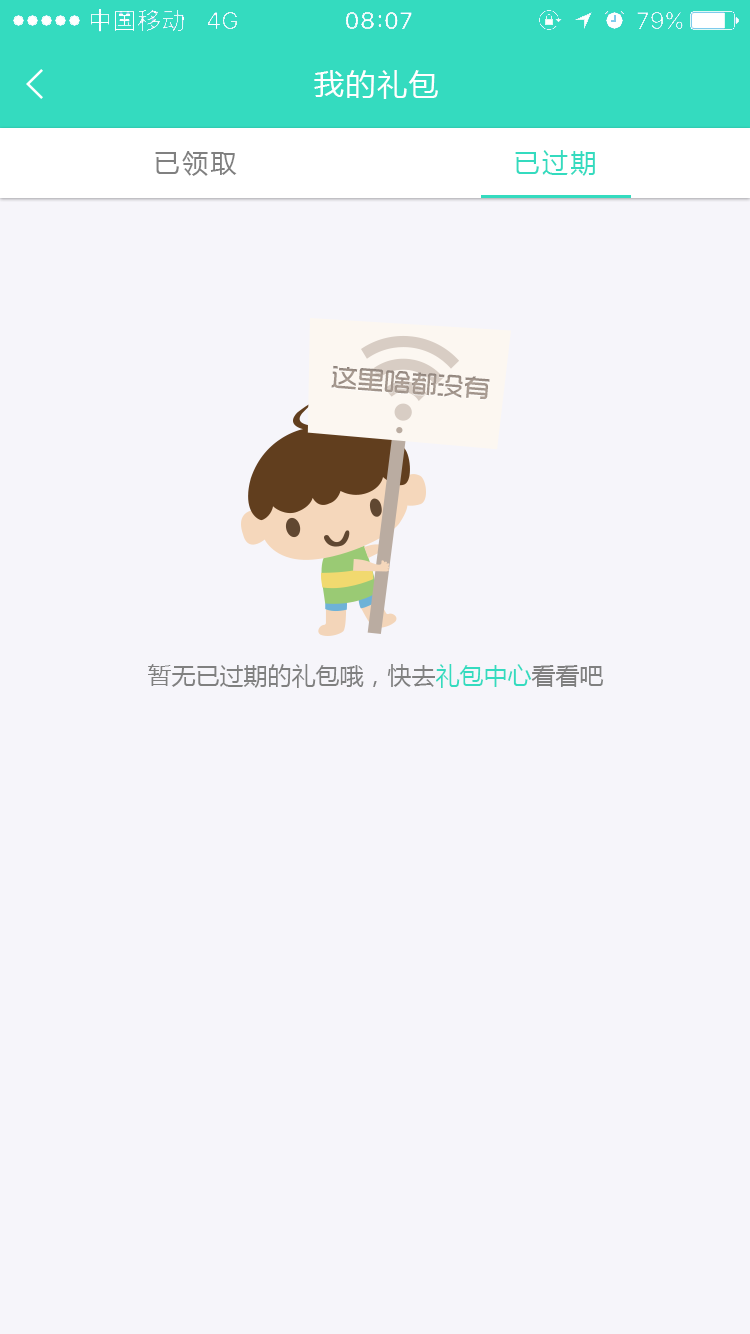
<style>
.page{position:relative;width:750px;height:1334px;background:#f6f5fa}
.page>*{position:absolute;margin:0}
.t1{font:30px "MicrosoftYaHei";letter-spacing:0.05em;color:#ffffff}
.t2{font:26px "MicrosoftYaHei";letter-spacing:0.09em;color:#34dbbf}
.t3{font:26px "MicrosoftYaHei";letter-spacing:0.09em;color:#808080}
.t4{font:26.5px "TRENDS";color:#a2958c}
.t5{font:24px "MicrosoftYaHei";color:#808080}
.t6{font:24px "MicrosoftYaHei";color:#34dbbf}
</style>
<div class="page">
<p class="t1" style="left:314px;top:70px;width:124px;height:29px">我的礼包</p>
<p class="t2" style="left:515px;top:150px;width:80px;height:26px">已过期</p>
<p class="t3" style="left:155px;top:151px;width:82px;height:25px">已领取</p>
<p class="t4" style="left:331px;top:365px;width:159px;height:35px;rotate:4deg">这里啥都没有</p>
<p class="t5" style="left:148px;top:664px;width:456px;height:24px">暂无已过期的礼包哦，快去<span class="t6">礼包中心</span>看看吧</p>
</div>
